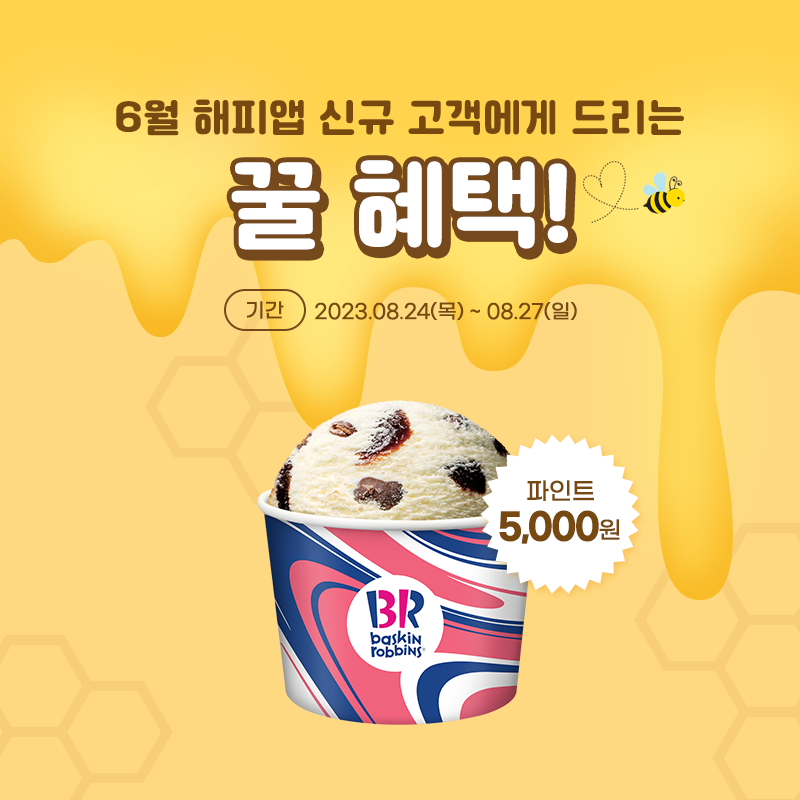
<style>
.page{position:relative;width:800px;height:800px;background:#fed981}
.page>*{position:absolute;margin:0}
.t1{font:40px "Cafe24SsurroundOTF";color:#77480f}
.t2{font:100px "Cafe24SsurroundOTF";color:#ffffff}
.t3{font:20px "GmarketSansMedium";color:#77480f}
.t4{font:24px "GmarketSansMedium";color:#77480f}
.t5{font:36px "GmarketSansBold";letter-spacing:-0.05em;color:#77480f}
.t6{font:24px "GmarketSansMedium";letter-spacing:-0.05em;color:#77480f}
</style>
<div class="page">
<p class="t1" style="left:116px;top:99px;width:568px;height:37px">6월 해피앱 신규 고객에게 드리는</p>
<p class="t2" style="left:231px;top:160px;width:337px;height:90px">꿀 혜택!</p>
<p class="t3" style="left:247px;top:301px;width:37px;height:18px">기간</p>
<p class="t3" style="left:315px;top:302px;width:262px;height:18px">2023.08.24(목) ~ 08.27(일)</p>
<p class="t4" style="left:527px;top:480px;width:67px;height:21px">파인트</p>
<p class="t5" style="left:499px;top:510px;width:121px;height:34px">5,000<span class="t6">원</span></p>
</div>
